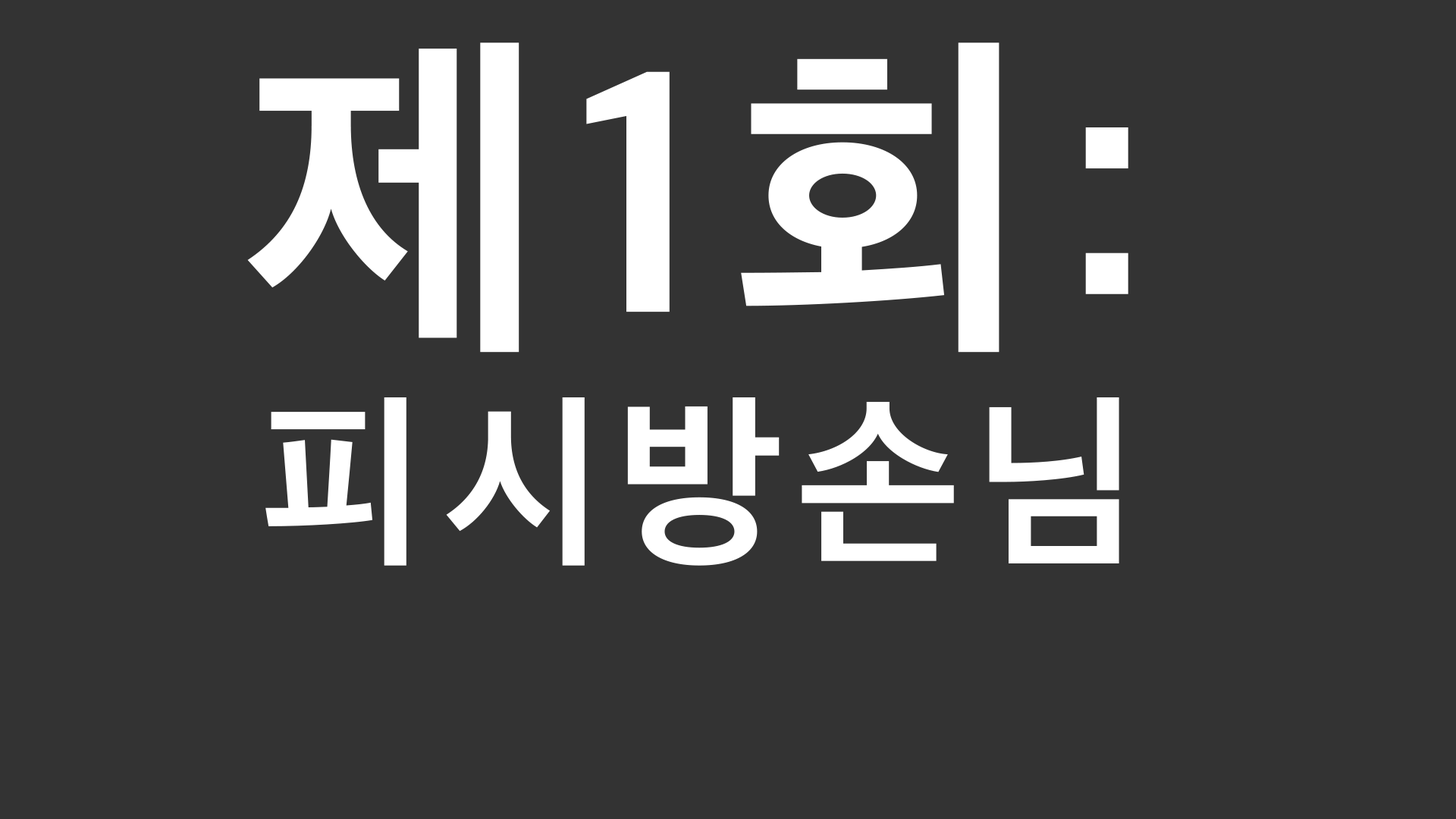
<style>
.page{position:relative;width:1456px;height:819px;background:#333333}
.page>*{position:absolute;margin:0}
.t1{font:188.6px "AppleSDGothicNeo-Bold";letter-spacing:0.08em;color:#ffffff}
.t2{font:347.1px "AppleSDGothicNeo-Bold";letter-spacing:0.08em;color:#ffffff}
</style>
<div class="page">
<p class="t1" style="left:247px;top:42px;width:881px;height:524px;text-align:center"><span class="t2">제1회:<br></span>피시방손님</p>
</div>
